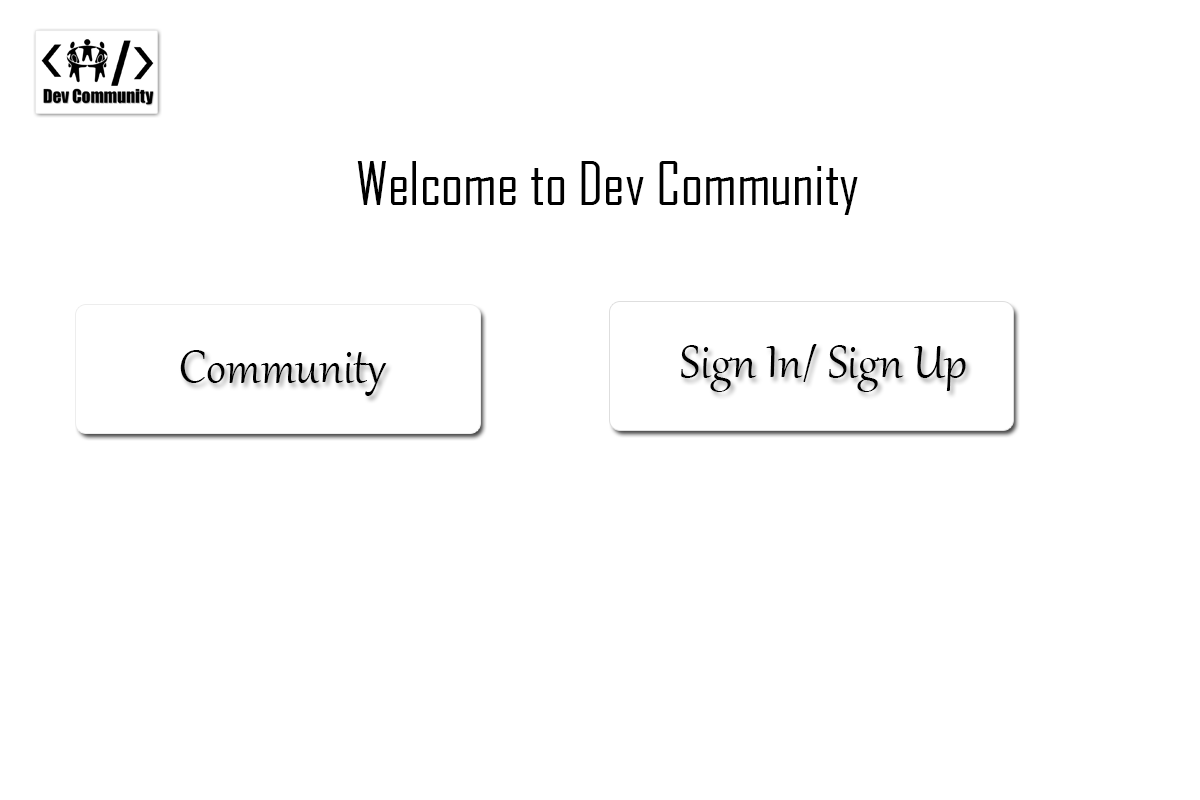
<style>
.page{position:relative;width:1200px;height:800px;background:#ffffff}
.page>*{position:absolute;margin:0}
.t1{font:58px "AgencyFB-Reg";color:#000000}
.t2{font:56px "Gabriola";color:#000000}
</style>
<div class="page">
<p class="t1" style="left:357px;top:161px;width:501px;height:54px">Welcome to Dev Community</p>
<p class="t2" style="left:180px;top:350px;width:207px;height:46px">Community</p>
<p class="t2" style="left:681px;top:344px;width:285px;height:48px">Sign In/ Sign Up</p>
</div>
